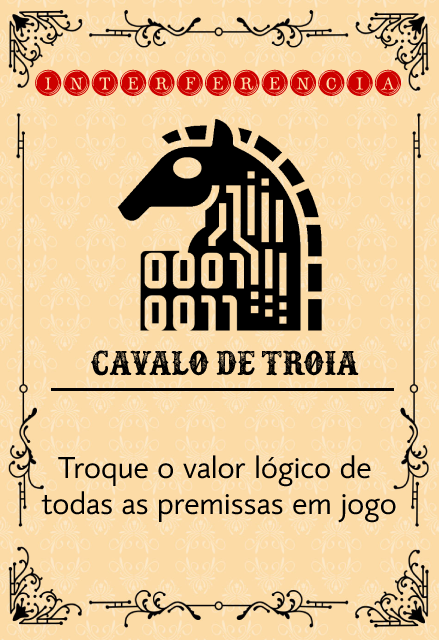
<style>
.page{position:relative;width:439px;height:640px;background:#fcdba6}
.page>*{position:absolute;margin:0}
.t1{font:35px "TypeKeysFilled";color:#cd0000}
.t2{font:38.4px "Docktrin";color:#000000}
.t3{font:29.5px "mirror82";color:#000000}
</style>
<div class="page">
<p class="t1" style="left:35px;top:69px;width:367px;height:27px">interferencia</p>
<p class="t2" style="left:90px;top:350px;width:269px;height:26px">Cavalo de troia</p>
<p class="t3" style="left:41px;top:455px;width:355px;height:68px;text-align:center">Troque o valor lógico de <br>todas as premissas em jogo</p>
</div>
